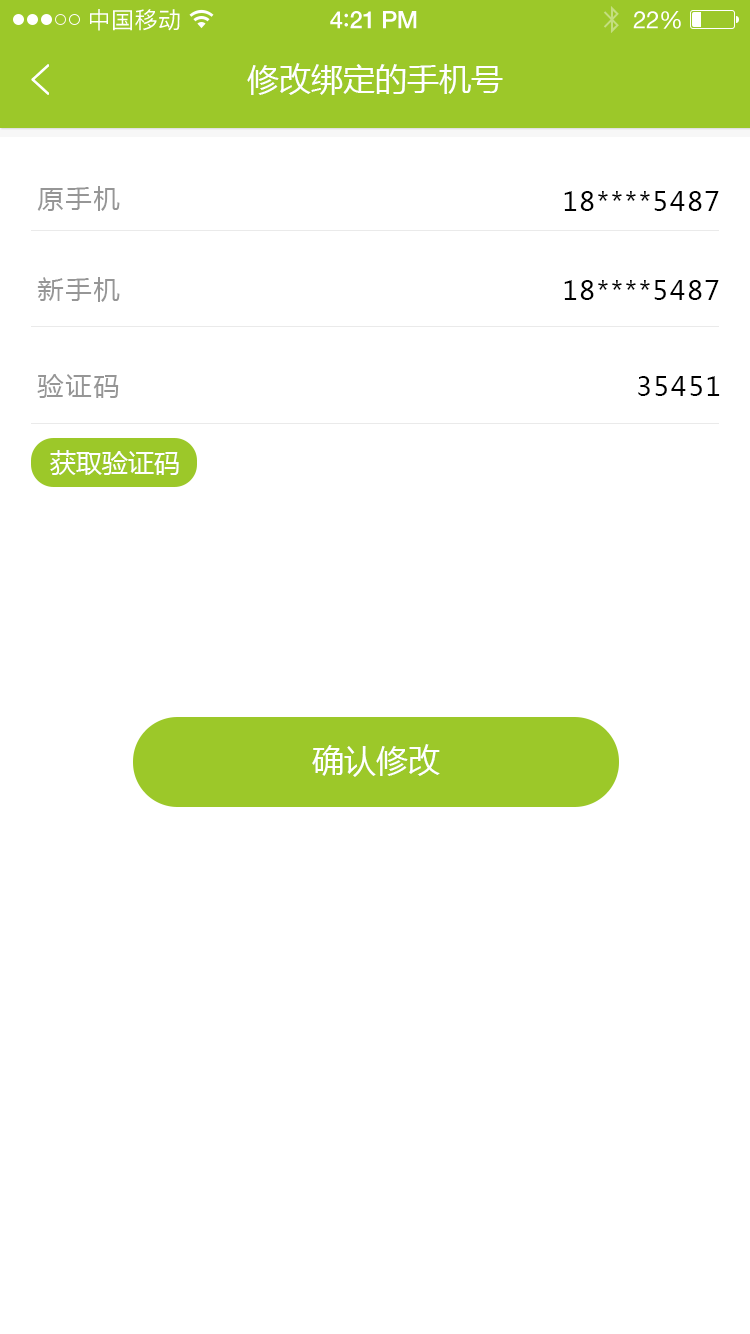
<style>
.page{position:relative;width:750px;height:1334px;background:#ffffff}
.page>*{position:absolute;margin:0}
.t1{font:23px "PingFangSC-Regular";letter-spacing:0.02em;color:#ffffff}
.t2{font:24px "HelveticaNeue-Medium";letter-spacing:-0.02em;color:#ffffff}
.t3{font:26px "Avenir-Medium";letter-spacing:-0.02em;color:#ffffff}
.t4{font:24px "HelveticaNeue";letter-spacing:-0.02em;color:#ffffff}
.t5{font:32px "MicrosoftYaHei";color:#ffffff;text-transform:uppercase}
.t6{font:26px "MicrosoftYaHei";letter-spacing:0.08em;color:#969696;text-transform:uppercase}
.t7{font:26px "MicrosoftYaHei";letter-spacing:0.08em;color:#000000;text-transform:uppercase}
.t8{font:26px "MicrosoftYaHei";color:#ffffff;text-transform:uppercase}
</style>
<div class="page">
<p class="t1" style="left:90px;top:9px;width:90px;height:22px">中国移动</p>
<p class="t2" style="left:330px;top:11px;width:87px;height:18px">4<span class="t3">:</span>21 PM</p>
<p class="t4" style="left:633px;top:11px;width:48px;height:18px">22%</p>
<p class="t5" style="left:247px;top:63px;width:256px;height:32px">修改绑定的手机号</p>
<p class="t6" style="left:37px;top:186px;width:83px;height:25px">原手机</p>
<p class="t7" style="left:564px;top:191px;width:155px;height:20px">18****5487</p>
<p class="t6" style="left:37px;top:277px;width:83px;height:25px">新手机</p>
<p class="t7" style="left:564px;top:280px;width:155px;height:20px">18****5487</p>
<p class="t6" style="left:37px;top:374px;width:82px;height:24px">验证码</p>
<p class="t7" style="left:638px;top:376px;width:82px;height:20px">35451</p>
<p class="t8" style="left:50px;top:450px;width:129px;height:25px">获取验证码</p>
<p class="t5" style="left:312px;top:744px;width:128px;height:33px">确认修改</p>
</div>
